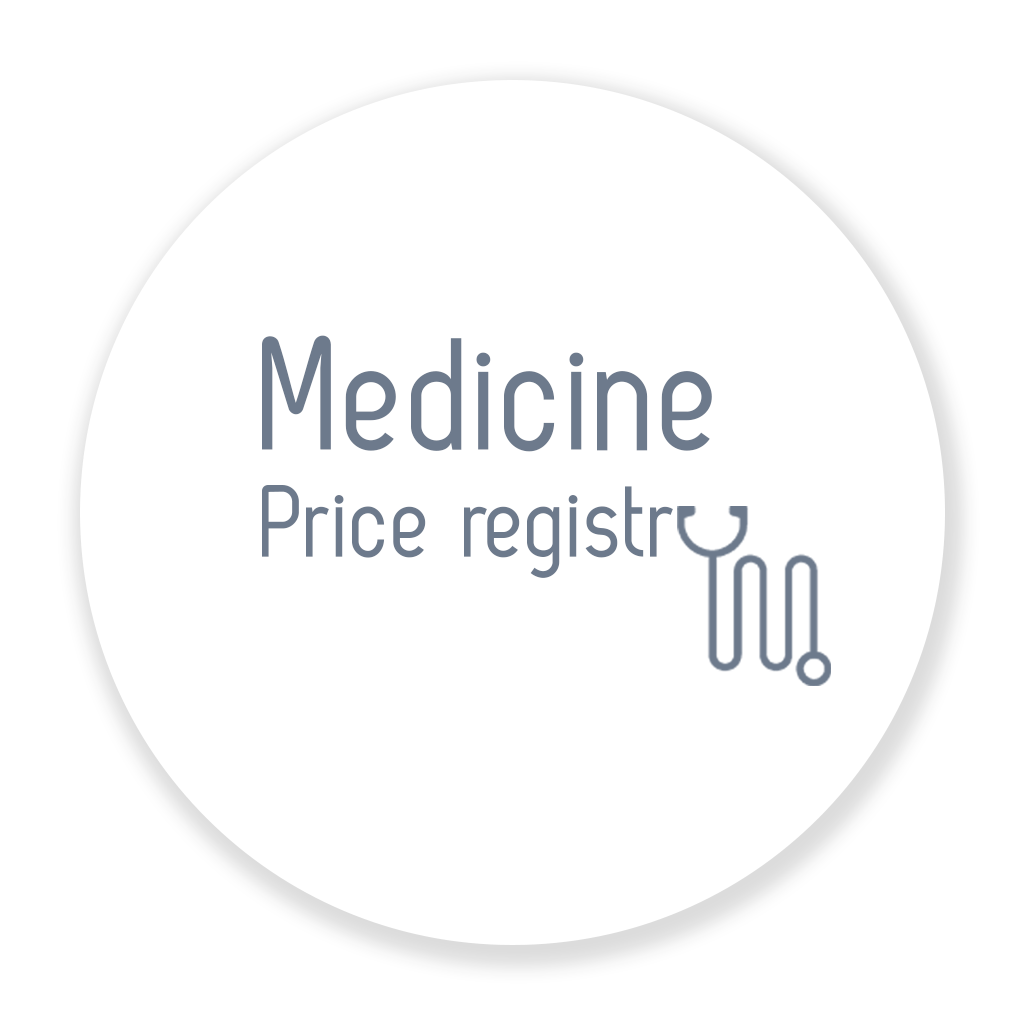
<style>
.page{position:relative;width:1024px;height:1024px;background:#ffffff}
.page>*{position:absolute;margin:0}
.t1{font:103.5px/106.9px "ZagRegular";color:#6d7a8c}
.t2{font:161.9px/144.7px "ZagRegular";color:#6d7a8c}
</style>
<div class="page">
<p class="t1" style="left:262px;top:335px;width:450px;height:243px"><span class="t2">Medicine<br></span>Price registr</p>
</div>
